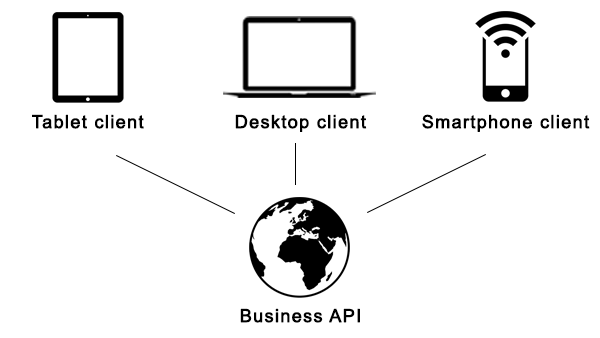
<style>
.page{position:relative;width:600px;height:338px;background:#ffffff}
.page>*{position:absolute;margin:0}
.t1{font:18px "ArialMT";letter-spacing:0.05em;color:#000000;font-weight:bold}
</style>
<div class="page">
<p class="t1" style="left:32px;top:114px;width:112px;height:15px">Tablet client</p>
<p class="t1" style="left:235px;top:114px;width:132px;height:18px">Desktop client</p>
<p class="t1" style="left:422px;top:114px;width:168px;height:18px">Smartphone client</p>
<p class="t1" style="left:240px;top:308px;width:120px;height:15px">Business API</p>
</div>
